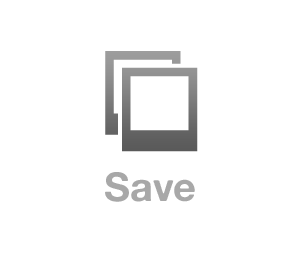
<style>
.page{position:relative;width:300px;height:260px;background:#ffffff}
.page>*{position:absolute;margin:0}
.t1{font:40px "AlteHaasGrotesk_Bold";color:#a8a8a8}
</style>
<div class="page">
<p class="t1" style="left:105px;top:172px;width:90px;height:30px">Save</p>
</div>
